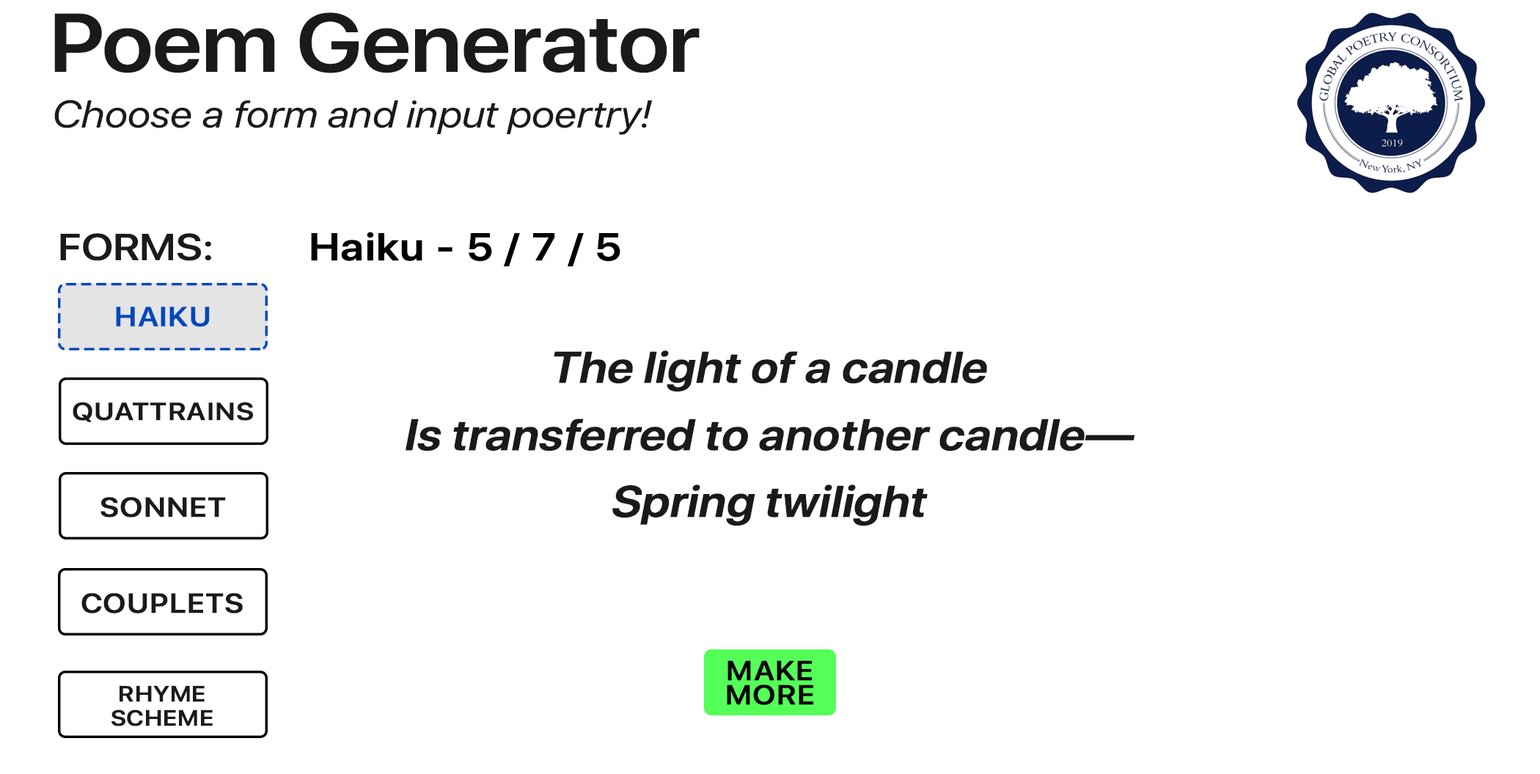
<style>
.page{position:relative;width:1540px;height:774px;background:#ffffff}
.page>*{position:absolute;margin:0}
.t1{font:82.5px "SFProDisplay-Semibold";letter-spacing:-0.005em;color:#1a1a1a;scale:1.11 1}
.t2{font:38.5px "SFProDisplay-RegularItalic";color:#1a1a1a;scale:1.11 1}
.t3{font:37.6px "SFProDisplay-Semibold";color:#1a1a1a;scale:1.14 1}
.t4{font:38.5px "SFProDisplay-Semibold";letter-spacing:0.025em;color:#000000;font-weight:bold;scale:1.11 1}
.t5{font:27.5px "SFProDisplay-Semibold";letter-spacing:0.025em;color:#0048ba;font-weight:bold;scale:1.11 1}
.t6{font:44px/33.6px "SFProDisplay-Semibold";color:#1a1a1a;font-weight:bold;font-style:italic;scale:1.09 1}
.t7{font:24.7px "SFProDisplay-Semibold";letter-spacing:0.025em;color:#1a1a1a;font-weight:bold;scale:1.14 1}
.t8{font:27.5px "SFProDisplay-Semibold";letter-spacing:0.025em;color:#1a1a1a;font-weight:bold;scale:1.11 1}
.t9{font:27.5px/24.4px "SFProDisplay-Semibold";letter-spacing:0.025em;color:#000000;font-weight:bold;scale:1.11 1}
.t10{font:22px/24.4px "SFProDisplay-Semibold";letter-spacing:0.025em;color:#1a1a1a;font-weight:bold;scale:1.11 1}
</style>
<div class="page">
<p class="t1" style="left:54px;top:12px;width:646px;height:61px">Poem Generator</p>
<p class="t2" style="left:54px;top:100px;width:599px;height:35px">Choose a form and input poertry!</p>
<p class="t3" style="left:60px;top:233px;width:151px;height:28px">FORMS:</p>
<p class="t4" style="left:311px;top:232px;width:309px;height:35px">Haiku - 5 / 7 / 5</p>
<p class="t5" style="left:116px;top:307px;width:94px;height:20px">HAIKU</p>
<p class="t6" style="left:406px;top:351px;width:729px;height:176px;text-align:center">The light of a candle<br><br>Is transferred to another candle—<br><br>Spring twilight</p>
<p class="t7" style="left:73px;top:402px;width:180px;height:20px">QUATTRAINS</p>
<p class="t8" style="left:100px;top:497px;width:126px;height:21px">SONNET</p>
<p class="t8" style="left:81px;top:593px;width:162px;height:21px">COUPLETS</p>
<p class="t9" style="left:727px;top:661px;width:86px;height:44px;text-align:center">MAKE <br>MORE</p>
<p class="t10" style="left:111px;top:686px;width:102px;height:41px;text-align:center">RHYME <br>SCHEME</p>
</div>
